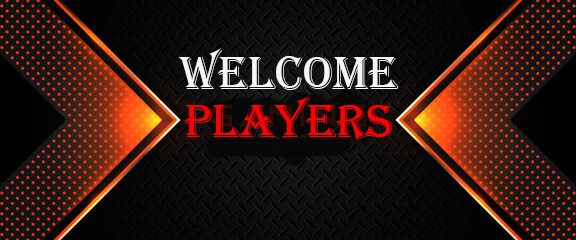
<style>
.page{position:relative;width:576px;height:240px}
.page>*{position:absolute;margin:0}
.t1{font:48.4px "Algerian";color:#f6f6f6}
.t2{font:48.2px "Algerian";color:#ff0000}
</style>
<div class="page">
<p class="t1" style="left:178px;top:48px;width:221px;height:42px">WELCOME</p>
<p class="t2" style="left:184px;top:97px;width:209px;height:44px">players</p>
</div>
